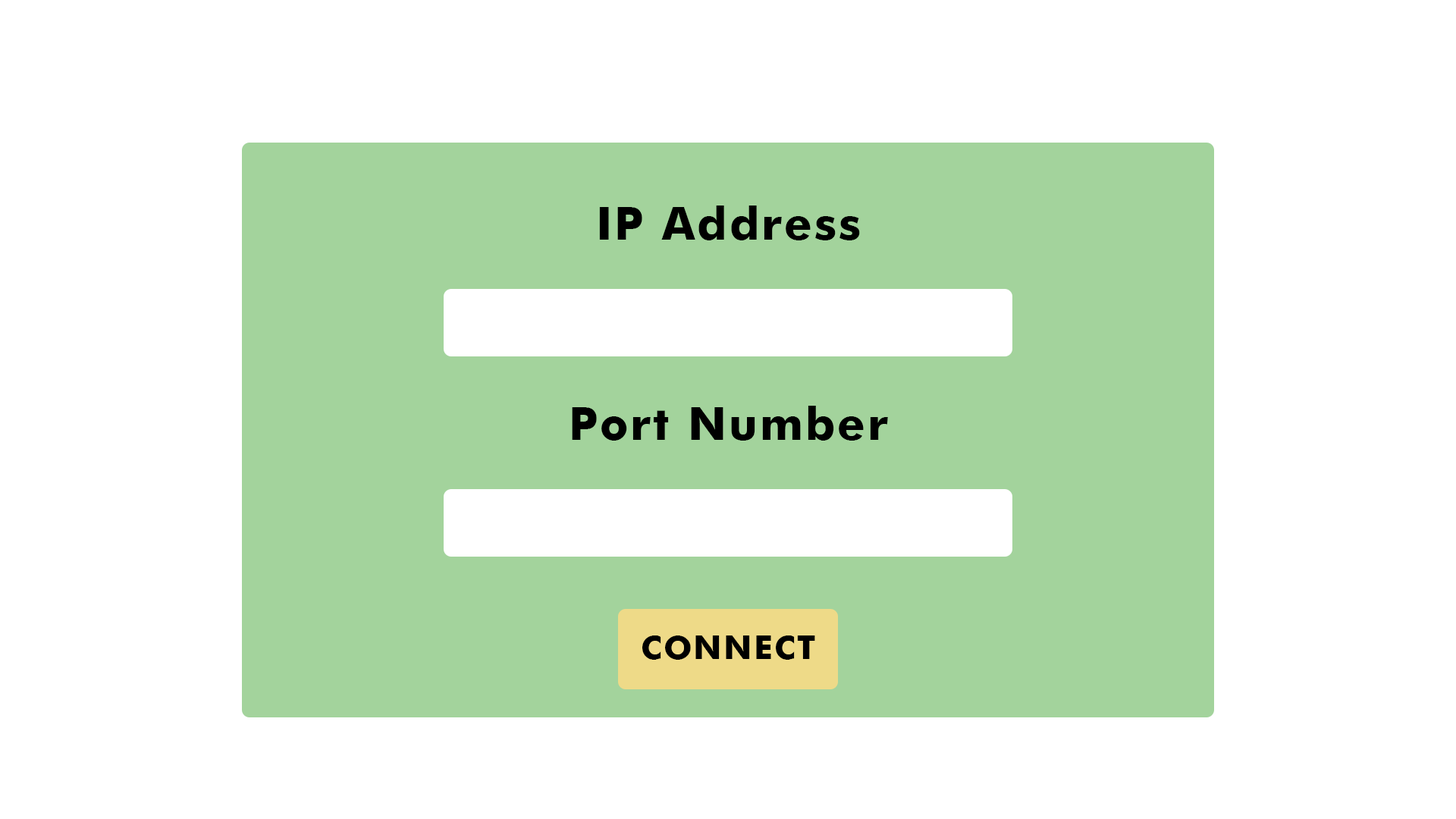
<style>
.page{position:relative;width:1456px;height:819px;background:#ffffff}
.page>*{position:absolute;margin:0}
.t1{font:45.5px "Futura-Bold";letter-spacing:0.05em;color:#000000}
.t2{font:33.4px "Futura-Bold";letter-spacing:0.05em;color:#000000}
</style>
<div class="page">
<p class="t1" style="left:599px;top:206px;width:261px;height:34px">IP Address</p>
<p class="t1" style="left:572px;top:406px;width:316px;height:35px">Port Number</p>
<p class="t2" style="left:642px;top:635px;width:173px;height:25px">CONNECT</p>
</div>
